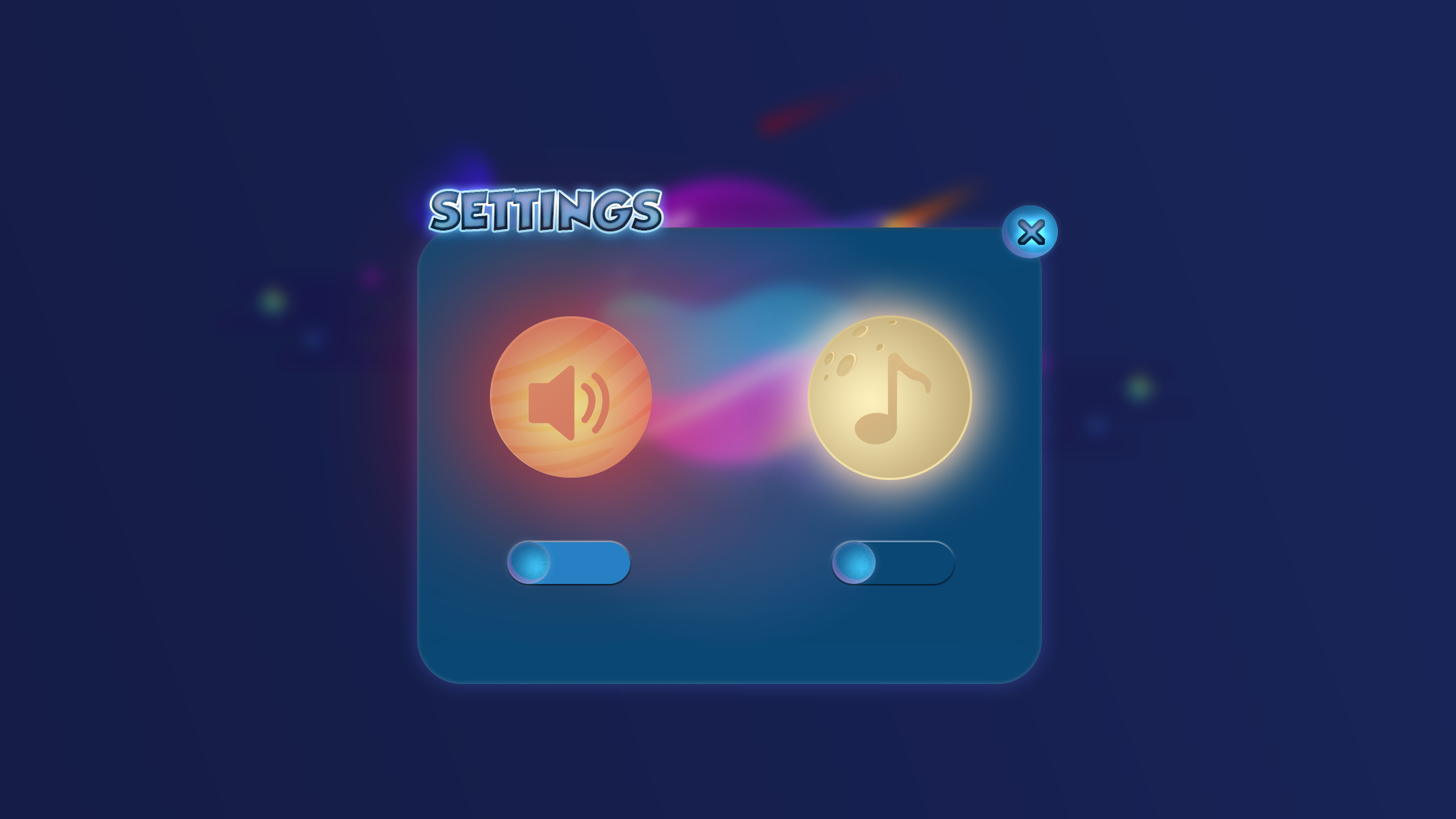
<style>
.page{position:relative;width:1456px;height:819px}
.page>*{position:absolute;margin:0}
.t1{font:46.8px "GROBOLD"}
</style>
<div class="page">
<p class="t1" style="left:430px;top:190px;width:232px;height:42px">SETTINGS</p>
<p class="t1" style="left:430px;top:190px;width:232px;height:42px">SETTINGS</p>
</div>
